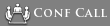
<style>
.page{position:relative;width:110px;height:26px;background:#808080}
.page>*{position:absolute;margin:0}
.t1{font:12px "TrajanPro-Bold";color:#ffffff;scale:1.05 1}
</style>
<div class="page">
<p class="t1" style="left:34px;top:8px;width:73px;height:9px">Conf Call</p>
</div>
